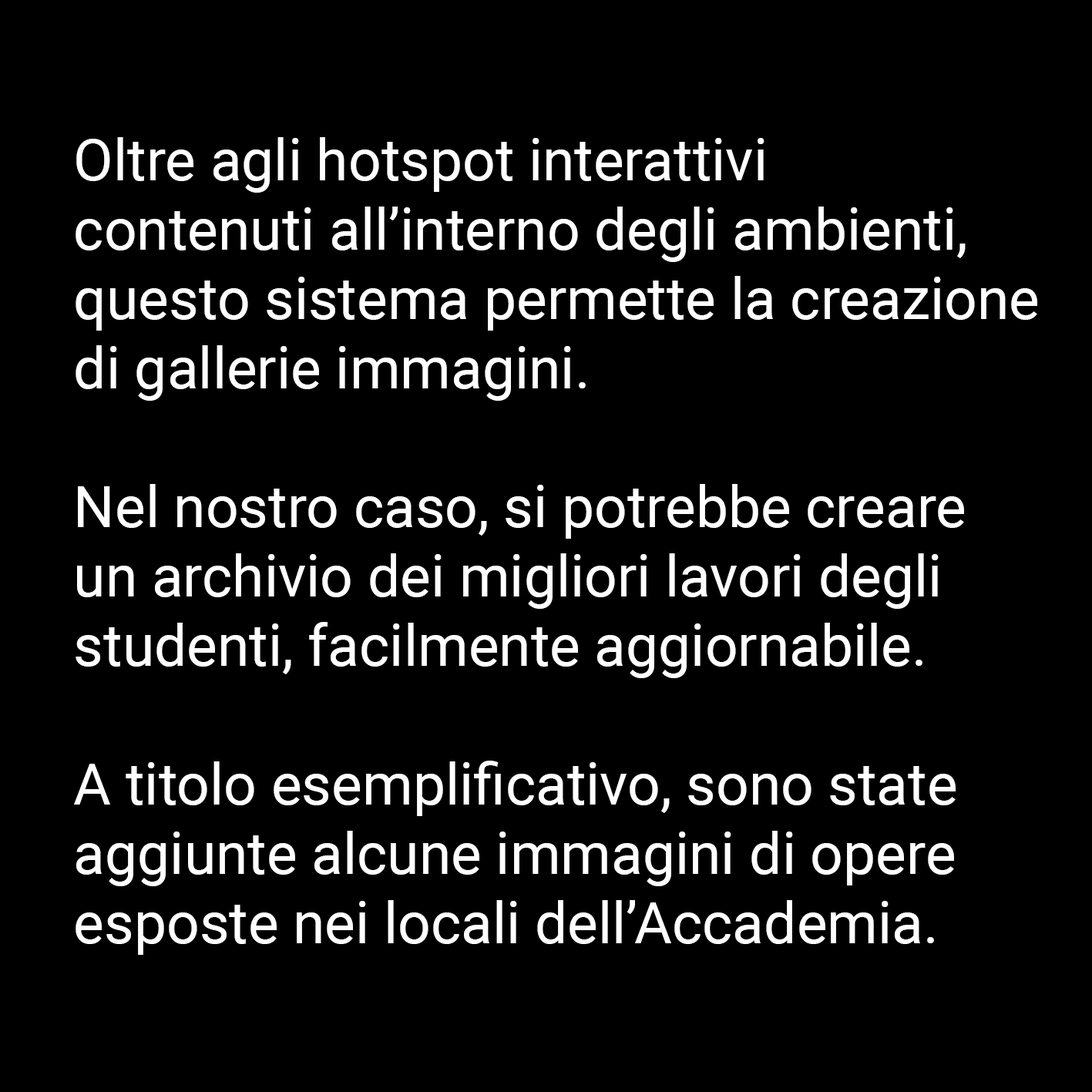
<style>
.page{position:relative;width:1092px;height:1092px;background:#000000}
.page>*{position:absolute;margin:0}
.t1{font:57.8px "Roboto-Regular";color:#ffffff}
</style>
<div class="page">
<p class="t1" style="left:74px;top:137px;width:963px;height:818px">Oltre agli hotspot interattivi<br>contenuti all’interno degli ambienti,<br>questo sistema permette la creazione<br>di gallerie immagini.<br><br>Nel nostro caso, si potrebbe creare <br>un archivio dei migliori lavori degli<br>studenti, facilmente aggiornabile.<br><br>A titolo esemplificativo, sono state<br>aggiunte alcune immagini di opere<br>esposte nei locali dell’Accademia.</p>
</div>
